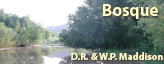
<style>
.page{position:relative;width:164px;height:64px}
.page>*{position:absolute;margin:0}
.t1{font:17px "MyriadPro-Bold";color:#fff9c3}
.t2{font:10px "MyriadPro-Bold";color:#fff9c3}
</style>
<div class="page">
<p class="t1" style="left:103px;top:4px;width:55px;height:15px">Bosque</p>
<p class="t2" style="left:71px;top:52px;width:92px;height:8px">D.R. &amp; W.P. Maddison</p>
</div>
